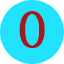
<style>
.page{position:relative;width:64px;height:64px;background:#22e2fe}
.page>*{position:absolute;margin:0}
.t1{font:48px "FZXKFW--GB1-0";color:#9e1e1e;font-weight:bold}
</style>
<div class="page">
<p class="t1" style="left:19px;top:11px;width:26px;height:38px">0</p>
</div>
